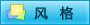
<style>
.page{position:relative;width:90px;height:25px}
.page>*{position:absolute;margin:0}
.t1{font:13px "MicrosoftYaHei";color:#003c52;font-weight:bold}
</style>
<div class="page">
<p class="t1" style="left:34px;top:6px;width:40px;height:14px">风   格</p>
</div>
